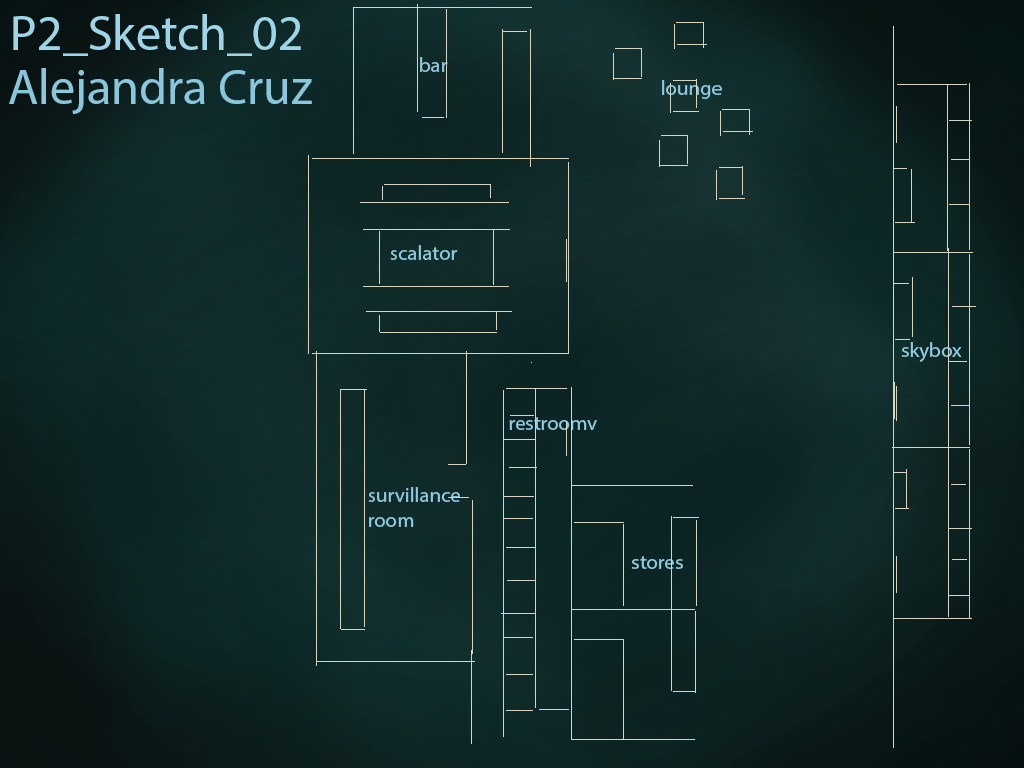
<style>
.page{position:relative;width:1024px;height:768px}
.page>*{position:absolute;margin:0}
.t1{font:50px "MyriadPro-Regular";color:#9ed6e8}
.t2{font:20.8px "MyriadPro-Regular";color:#90cce0}
.t3{font:12px "MyriadPro-Regular";color:#89c8dc}
</style>
<div class="page">
<p class="t1" style="left:13px;top:14px;width:288px;height:42px">P2_Sketch_02</p>
<p class="t2" style="left:420px;top:57px;width:28px;height:15px">bar</p>
<p class="t3" style="left:9px;top:68px;width:303px;height:46px">Alejandra Cruz</p>
<p class="t2" style="left:662px;top:80px;width:60px;height:19px">lounge</p>
<p class="t2" style="left:390px;top:245px;width:68px;height:15px">scalator</p>
<p class="t2" style="left:901px;top:342px;width:61px;height:20px">skybox</p>
<p class="t2" style="left:509px;top:417px;width:88px;height:13px">restroomv</p>
<p class="t2" style="left:368px;top:487px;width:92px;height:40px">survillance<br>room</p>
<p class="t2" style="left:631px;top:556px;width:52px;height:13px">stores</p>
</div>
